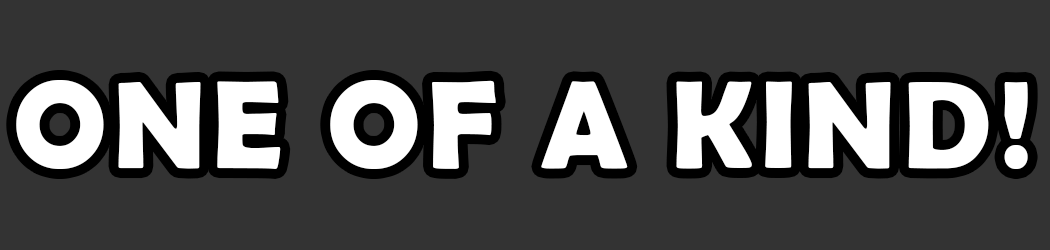
<style>
.page{position:relative;width:1050px;height:250px;background:#333333}
.page>*{position:absolute;margin:0}
.t1{font:125px "BerlinSansFBDemi-Bold";letter-spacing:0.05em;color:#ffffff}
</style>
<div class="page">
<p class="t1" style="left:16px;top:80px;width:1012px;height:89px">ONE OF A KIND!</p>
</div>
